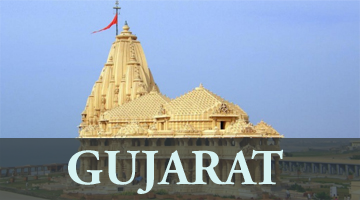
<style>
.page{position:relative;width:360px;height:200px}
.page>*{position:absolute;margin:0}
.t1{font:50px "AGaramondPro-Bold";color:#d6f2f2}
</style>
<div class="page">
<p class="t1" style="left:68px;top:149px;width:216px;height:45px">GUJARAT</p>
</div>
